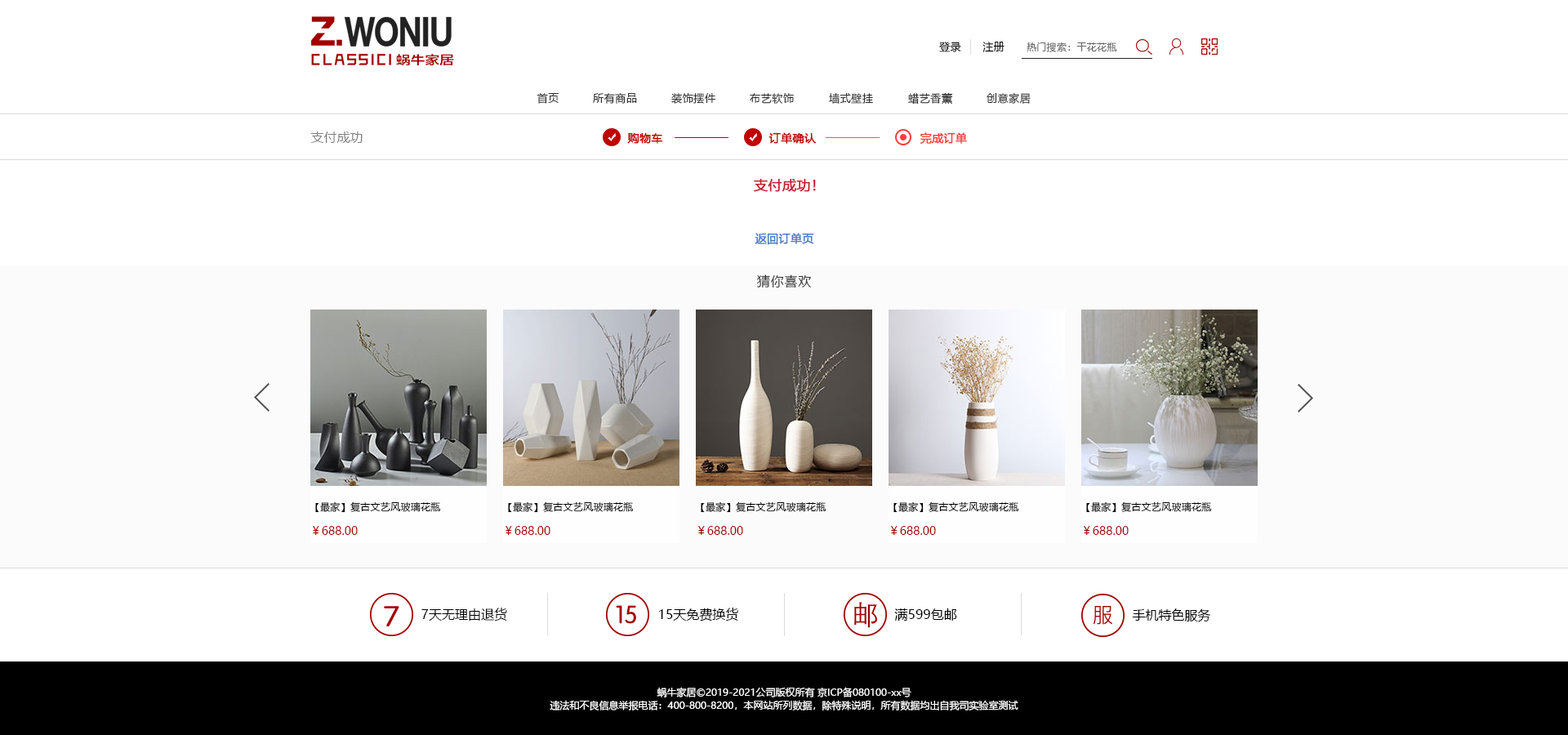
<style>
.page{position:relative;width:1568px;height:735px;background:#ffffff}
.page>*{position:absolute;margin:0}
.t1{font:10.6px "MicrosoftYaHei";letter-spacing:0.05em;color:#000000}
.t2{font:9.8px "MicrosoftYaHei";letter-spacing:0.025em;color:#686868}
.t3{font:10.6px "MicrosoftYaHei";letter-spacing:0.05em;color:#333333}
.t4{font:13.1px "MicrosoftYaHei";color:#808080}
.t5{font:11.4px "MicrosoftYaHei";color:#c10000;font-weight:bold}
.t6{font:11.4px "MicrosoftYaHei";color:#ff3c3c;font-weight:bold}
.t7{font:13.9px "MicrosoftYaHei";color:#c21e2e;font-weight:bold}
.t8{font:11.4px "MicrosoftYaHei";color:#4c7ac6;font-weight:bold}
.t9{font:13.1px "MicrosoftYaHei";letter-spacing:0.05em;color:#333333}
.t10{font:9.8px "MicrosoftYaHei";letter-spacing:0.025em;color:#000000}
.t11{font:11.4px "MicrosoftYaHei";color:#a10000}
.t12{font:13.1px "MicrosoftYaHei";color:#000000}
.t13{font:9.8px/13.1px "MicrosoftYaHei";color:#ffffff}
</style>
<div class="page">
<p class="t1" style="left:939px;top:42px;width:22px;height:10px">登录</p>
<p class="t1" style="left:982px;top:42px;width:22px;height:10px">注册</p>
<p class="t2" style="left:1027px;top:42px;width:90px;height:10px">热门搜索：干花花瓶</p>
<p class="t3" style="left:537px;top:93px;width:22px;height:11px">首页</p>
<p class="t3" style="left:593px;top:93px;width:44px;height:11px">所有商品</p>
<p class="t3" style="left:671px;top:93px;width:44px;height:11px">装饰摆件</p>
<p class="t3" style="left:750px;top:93px;width:44px;height:11px">布艺软饰</p>
<p class="t3" style="left:828px;top:93px;width:45px;height:11px">墙式壁挂</p>
<p class="t3" style="left:908px;top:92px;width:45px;height:13px">蜡艺香薰</p>
<p class="t3" style="left:987px;top:93px;width:44px;height:11px">创意家居</p>
<p class="t4" style="left:310px;top:131px;width:53px;height:12px">支付成功</p>
<p class="t5" style="left:627px;top:133px;width:36px;height:11px">购物车</p>
<p class="t5" style="left:768px;top:132px;width:49px;height:12px">订单确认</p>
<p class="t6" style="left:920px;top:132px;width:47px;height:12px">完成订单</p>
<p class="t7" style="left:754px;top:179px;width:62px;height:13px">支付成功！</p>
<p class="t8" style="left:755px;top:233px;width:59px;height:12px">返回订单页</p>
<p class="t9" style="left:757px;top:274px;width:55px;height:14px">猜你喜欢</p>
<p class="t10" style="left:315px;top:501px;width:126px;height:11px">【最家】复古文艺风玻璃花瓶</p>
<p class="t10" style="left:508px;top:501px;width:126px;height:11px">【最家】复古文艺风玻璃花瓶</p>
<p class="t10" style="left:701px;top:501px;width:125px;height:11px">【最家】复古文艺风玻璃花瓶</p>
<p class="t10" style="left:893px;top:501px;width:126px;height:11px">【最家】复古文艺风玻璃花瓶</p>
<p class="t10" style="left:1086px;top:501px;width:126px;height:11px">【最家】复古文艺风玻璃花瓶</p>
<p class="t11" style="left:313px;top:526px;width:45px;height:9px">￥688.00</p>
<p class="t11" style="left:506px;top:526px;width:44px;height:9px">￥688.00</p>
<p class="t11" style="left:698px;top:526px;width:45px;height:9px">￥688.00</p>
<p class="t11" style="left:891px;top:526px;width:45px;height:9px">￥688.00</p>
<p class="t11" style="left:1084px;top:526px;width:45px;height:9px">￥688.00</p>
<p class="t12" style="left:421px;top:608px;width:86px;height:13px">7天无理由退货</p>
<p class="t12" style="left:659px;top:608px;width:79px;height:13px">15天免费换货</p>
<p class="t12" style="left:894px;top:608px;width:63px;height:13px">满599包邮</p>
<p class="t12" style="left:1132px;top:608px;width:79px;height:14px">手机特色服务</p>
<p class="t13" style="left:550px;top:687px;width:468px;height:23px;text-align:center">蜗牛家居©2019-2021公司版权所有 京ICP备080100-xx号<br>违法和不良信息举报电话：400-800-8200，本网站所列数据，除特殊说明，所有数据均出自我司实验室测试</p>
</div>
